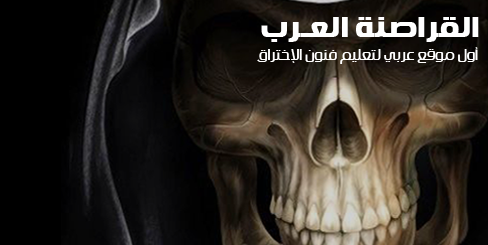
<style>
.page{position:relative;width:488px;height:245px}
.page>*{position:absolute;margin:0}
.t1{font:29.3px "HacenSaudiArabiaXL";color:#ffffff}
.t2{font:14.7px "HacenSaudiArabia";color:#ffffff}
</style>
<div class="page">
<p class="t1" style="left:261px;top:17px;width:218px;height:25px">القراصنة العـرب</p>
<p class="t2" style="left:257px;top:47px;width:221px;height:17px">أول موقع عربي لتعليم فنون الإختراق</p>
</div>
